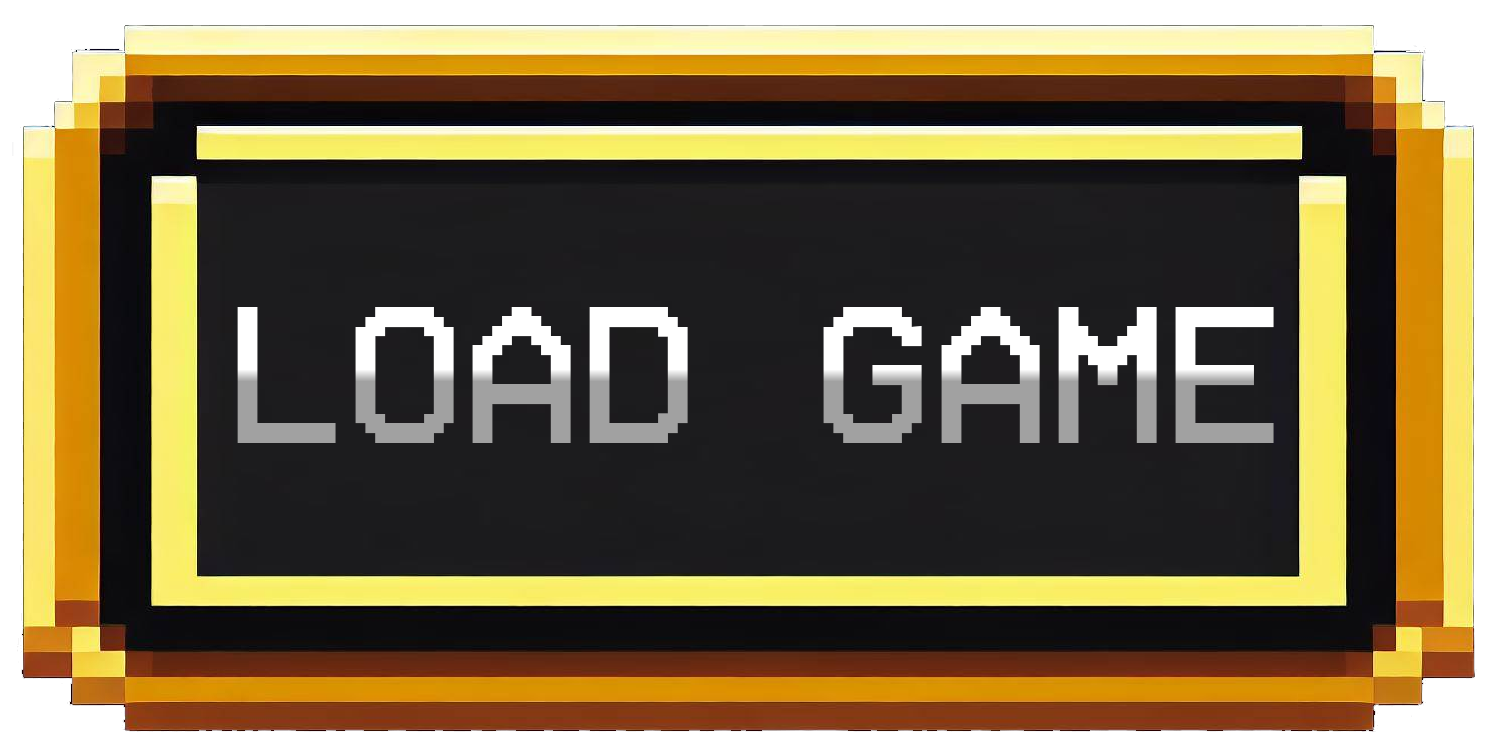
<style>
.page{position:relative;width:1500px;height:754px}
.page>*{position:absolute;margin:0}
.t1{font:200px "VCROSDMono"}
</style>
<div class="page">
<p class="t1" style="left:237px;top:307px;width:1037px;height:136px">LOAD GAME</p>
</div>
